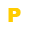
<style>
.page{position:relative;width:29px;height:50px;background:#ffffff}
.page>*{position:absolute;margin:0}
.t1{font:19.2px "Arial-Black";letter-spacing:-0.05em;color:#ffcc00;scale:1.04 1}
</style>
<div class="page">
<p class="t1" style="left:8px;top:8px;width:13px;height:14px">P</p>
</div>
